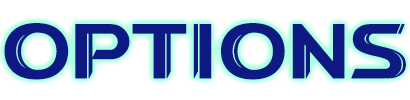
<style>
.page{position:relative;width:410px;height:100px;background:#ffffff}
.page>*{position:absolute;margin:0}
.t1{font:75px "SweraDemoShadowed";color:#0e1984;font-weight:bold}
</style>
<div class="page">
<p class="t1" style="left:4px;top:23px;width:402px;height:57px">options</p>
</div>
